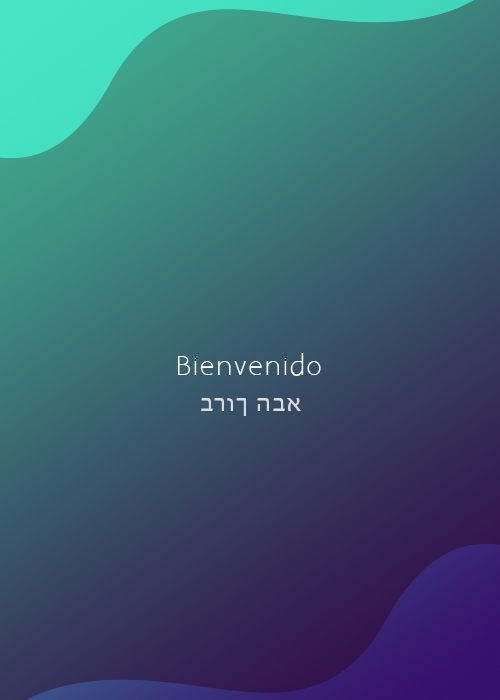
<style>
.page{position:relative;width:500px;height:700px}
.page>*{position:absolute;margin:0}
.t1{font:24px "AaarghNormal";letter-spacing:0.075em;color:#ffffff}
.t2{font:24px "MyriadHebrew-Regular";letter-spacing:0.075em;color:#d9dcdf}
</style>
<div class="page">
<p class="t1" style="left:178px;top:353px;width:143px;height:23px">Bienvenido</p>
<p class="t2" style="left:201px;top:397px;width:100px;height:19px">ברוך הבא</p>
</div>
